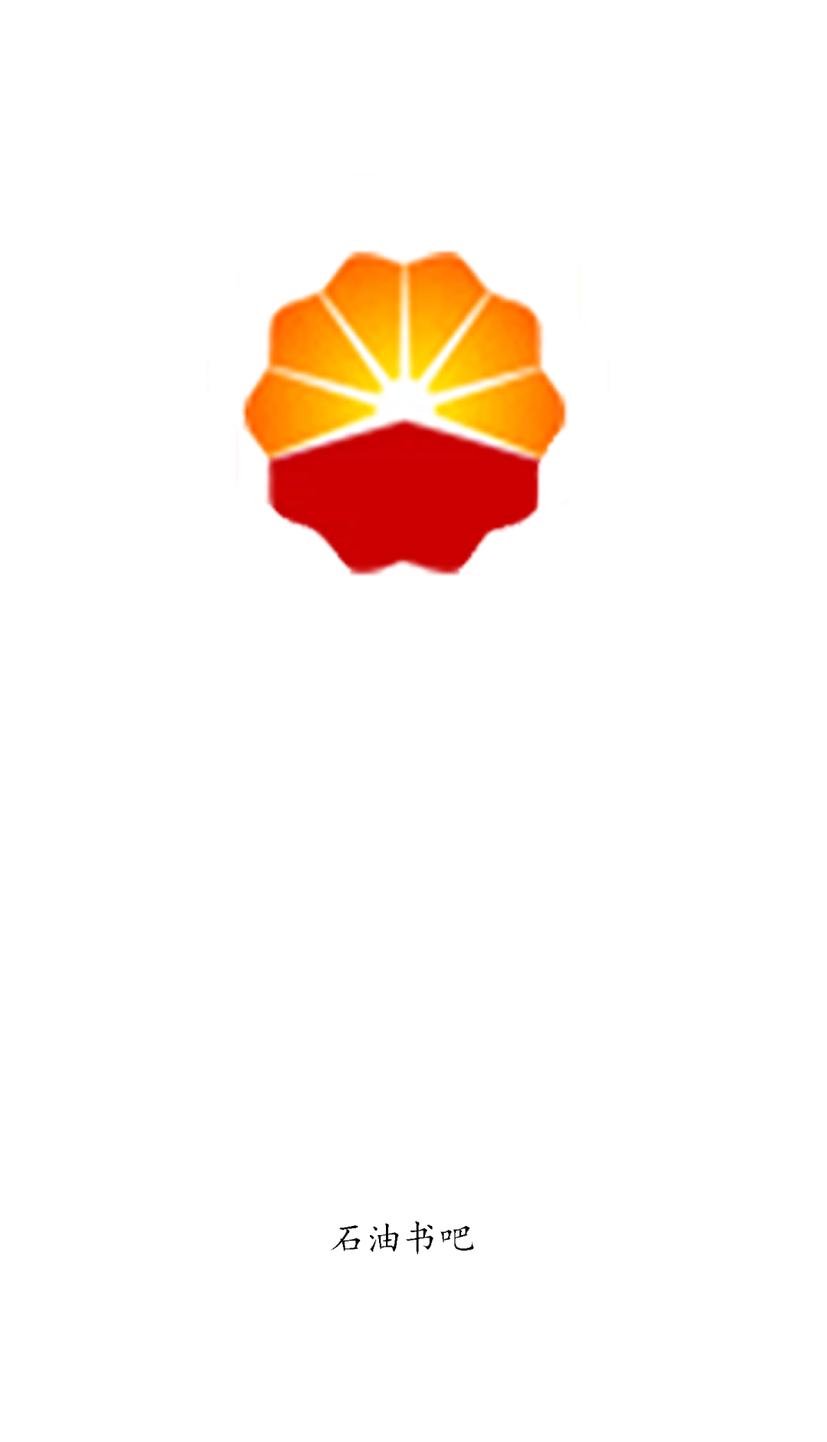
<style>
.page{position:relative;width:827px;height:1442px;background:#ffffff}
.page>*{position:absolute;margin:0}
.t1{font:36.8px "¿¬Ìå";color:#000000}
</style>
<div class="page">
<p class="t1" style="left:331px;top:1221px;width:143px;height:33px">石油书吧</p>
</div>
